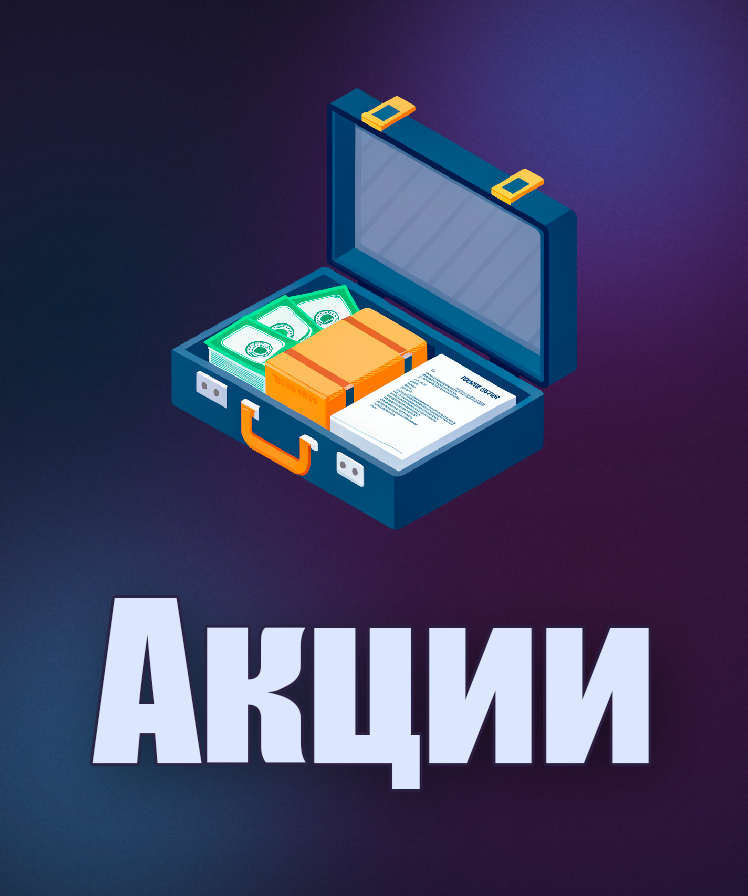
<style>
.page{position:relative;width:748px;height:896px}
.page>*{position:absolute;margin:0}
.t1{font:208.7px "Impact";color:#dde6ff}
</style>
<div class="page">
<p class="t1" style="left:92px;top:598px;width:557px;height:191px">Акции</p>
</div>
